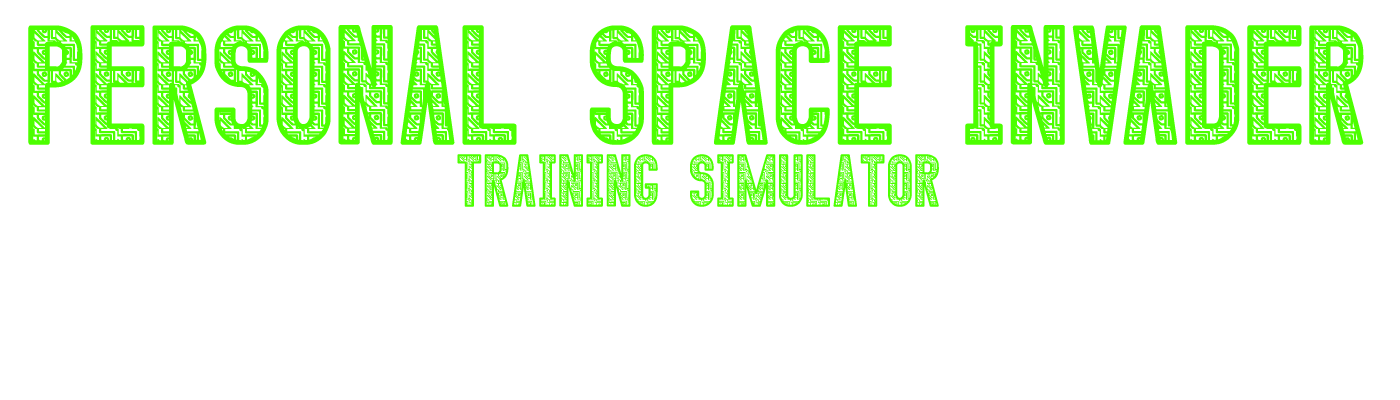
<style>
.page{position:relative;width:1400px;height:400px;background:#ffffff}
.page>*{position:absolute;margin:0}
.t1{font:112.1px "CalenduliaSt";color:#4cff00}
.t2{font:49.3px "CalenduliaSt";color:#4cff00}
</style>
<div class="page">
<p class="t1" style="left:28px;top:25px;width:1336px;height:120px">PERsonal Space INVADER</p>
<p class="t2" style="left:457px;top:154px;width:482px;height:53px">TRAINING SIMULATOR</p>
</div>
